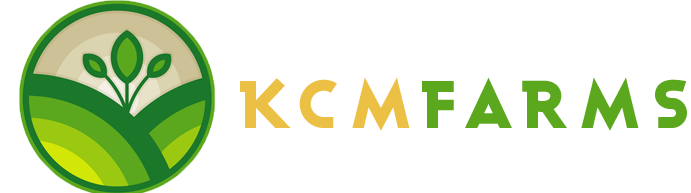
<style>
.page{position:relative;width:691px;height:193px;background:#ffffff}
.page>*{position:absolute;margin:0}
.t1{font:66.7px "AshbyBlack";letter-spacing:0.15em;color:#5ba81e;text-transform:uppercase}
.t2{font:66.7px "AshbyBlack";letter-spacing:0.15em;color:#ebc044;text-transform:uppercase}
</style>
<div class="page">
<p class="t1" style="left:240px;top:77px;width:447px;height:54px"><span class="t2">KCM</span>FARMS</p>
</div>
